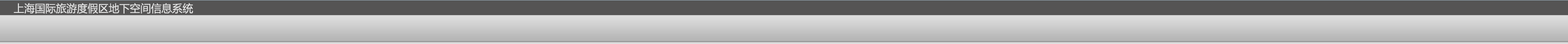
<style>
.page{position:relative;width:1568px;height:44px;background:#555454}
.page>*{position:absolute;margin:0}
.t1{font:10.6px "MicrosoftYaHei";color:#e6e6e6}
.t2{font:7px "SimSun";color:#e6e6e6}
</style>
<div class="page">
<p class="t1" style="left:14px;top:3px;width:179px;height:11px"><span class="t2">  </span>上海国际旅游度假区地下空间信息系统</p>
</div>
